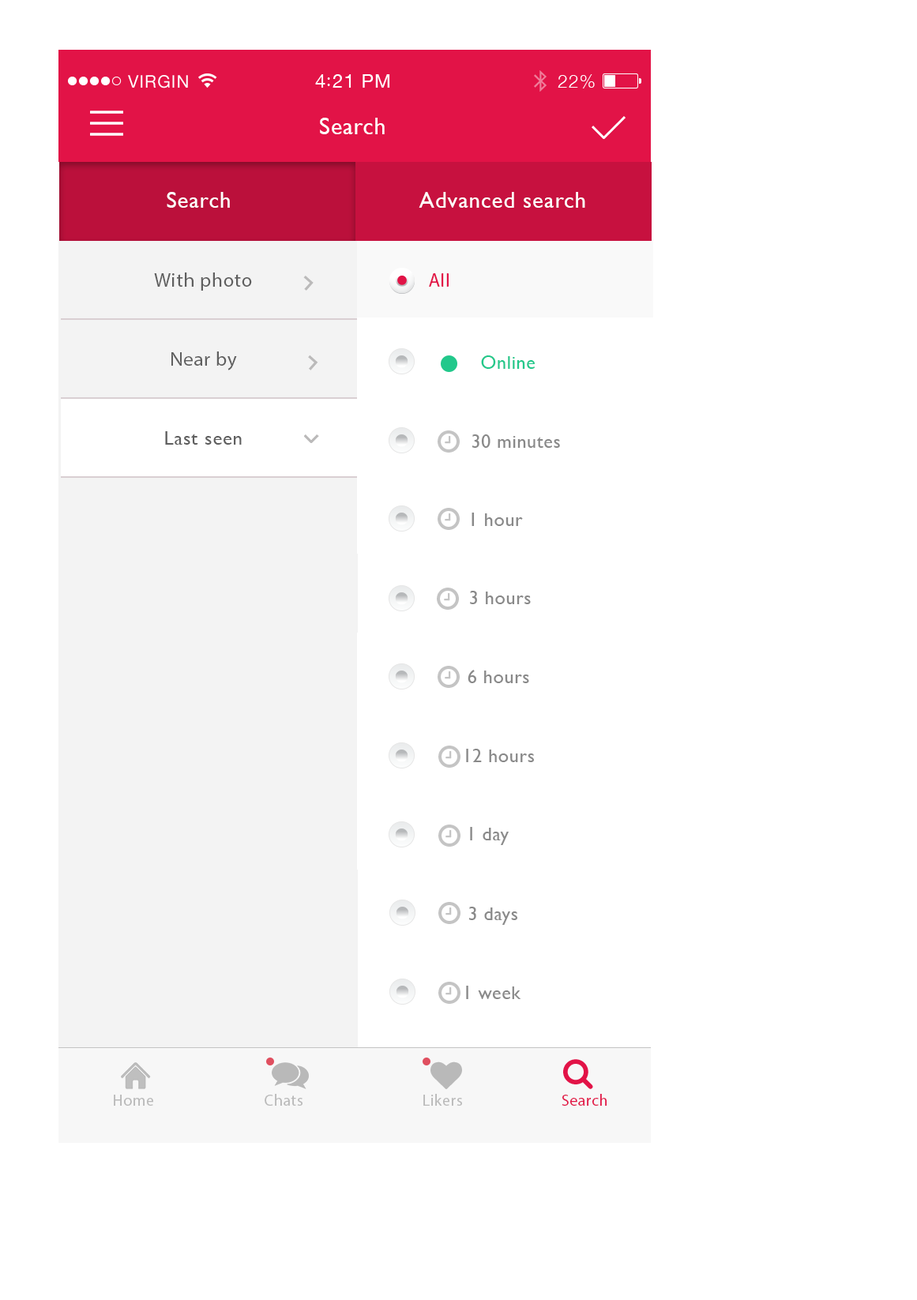
<style>
.page{position:relative;width:917px;height:1300px;background:#ffffff}
.page>*{position:absolute;margin:0}
.t1{font:23.7px "GillSans";letter-spacing:0.029em;color:#ffffff}
.t2{font:23px "GillSans";letter-spacing:0.029em;color:#ffffff}
.t3{font:19.7px "MyriadPro-Regular";letter-spacing:0.029em;color:#5f5f5f}
.t4{font:19px "MyriadPro-Regular";letter-spacing:0.029em;color:#e21347}
.t5{font:19px "GillSans";letter-spacing:0.029em;color:#22c88b}
.t6{font:19.7px "GillSans";letter-spacing:0.029em;color:#5f5f5f}
.t7{font:19px "GillSans";letter-spacing:0.029em;color:#898989}
.t8{font:15.8px "MyriadPro-Regular";letter-spacing:0.029em;color:#b9b9b9}
.t9{font:15.8px "MyriadPro-Regular";letter-spacing:0.029em;color:#e21347}
</style>
<div class="page">
<p class="t1" style="left:320px;top:118px;width:65px;height:16px">Search</p>
<p class="t2" style="left:167px;top:192px;width:63px;height:16px">Search</p>
<p class="t2" style="left:419px;top:192px;width:166px;height:16px">Advanced search</p>
<p class="t3" style="left:154px;top:273px;width:98px;height:18px">With photo</p>
<p class="t4" style="left:429px;top:273px;width:20px;height:14px">All</p>
<p class="t3" style="left:171px;top:352px;width:66px;height:18px">Near by</p>
<p class="t5" style="left:481px;top:355px;width:54px;height:14px">Online</p>
<p class="t6" style="left:165px;top:431px;width:77px;height:14px">Last seen</p>
<p class="t7" style="left:472px;top:434px;width:88px;height:14px">30 minutes</p>
<p class="t7" style="left:472px;top:513px;width:51px;height:13px">1 hour</p>
<p class="t7" style="left:470px;top:591px;width:61px;height:13px">3 hours</p>
<p class="t7" style="left:468px;top:670px;width:61px;height:13px">6 hours</p>
<p class="t7" style="left:466px;top:749px;width:68px;height:13px">12 hours</p>
<p class="t7" style="left:470px;top:827px;width:39px;height:18px">1 day</p>
<p class="t7" style="left:468px;top:907px;width:49px;height:18px">3 days</p>
<p class="t7" style="left:466px;top:986px;width:55px;height:13px">1 week</p>
<p class="t8" style="left:114px;top:1095px;width:39px;height:11px">Home</p>
<p class="t8" style="left:265px;top:1094px;width:38px;height:12px">Chats</p>
<p class="t8" style="left:423px;top:1094px;width:39px;height:12px">Likers</p>
<p class="t9" style="left:562px;top:1094px;width:45px;height:12px">Search</p>
</div>
